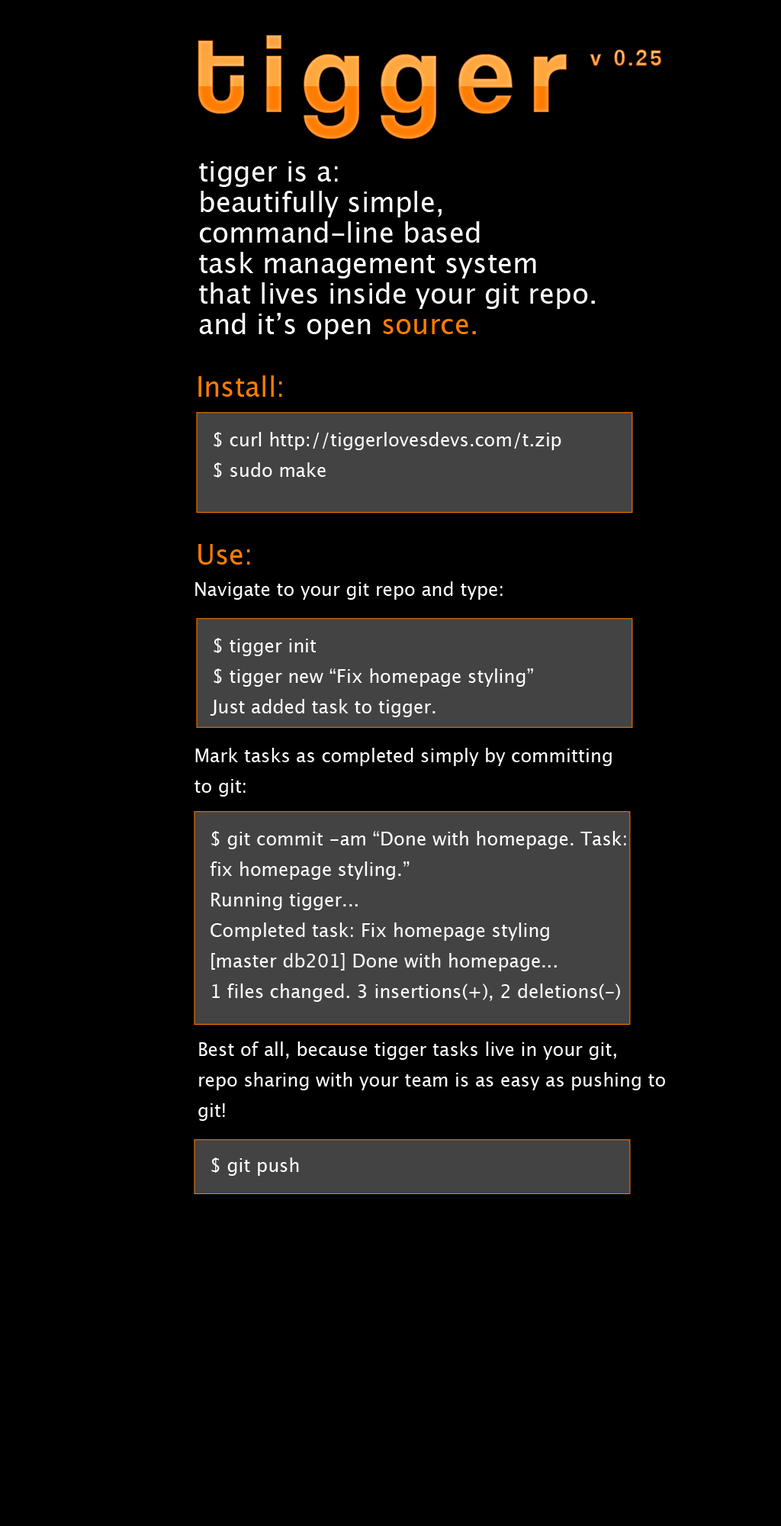
<style>
.page{position:relative;width:781px;height:1526px;background:#000000}
.page>*{position:absolute;margin:0}
.t1{font:114.5px "CoolveticaRg-Regular";letter-spacing:0.15em}
.t2{font:22.9px "CoolveticaRg-Regular";letter-spacing:0.15em}
.t3{font:27.5px/30.5px "LucidaGrande";color:#ffffff}
.t4{font:27.5px/30.5px "LucidaGrande";color:#ff7c00}
.t5{font:27.5px "LucidaGrande";color:#ff7c00}
.t6{font:18.3px/30.5px "LucidaGrande";color:#ffffff}
.t7{font:18.3px "LucidaGrande";color:#ffffff}
</style>
<div class="page">
<p class="t1" style="left:198px;top:35px;width:369px;height:104px">tigger</p>
<p class="t2" style="left:590px;top:50px;width:72px;height:16px">v 0.25</p>
<p class="t3" style="left:199px;top:161px;width:396px;height:179px">tigger is a: <br>beautifully simple, <br>command-line based<br>task management system <br>that lives inside your git repo.<br>and it’s open <span class="t4">source.</span></p>
<p class="t5" style="left:198px;top:375px;width:84px;height:22px">Install:</p>
<p class="t6" style="left:214px;top:432px;width:348px;height:46px">$ curl http://tiggerlovesdevs.com/t.zip<br>$ sudo make</p>
<p class="t5" style="left:198px;top:544px;width:52px;height:21px">Use:</p>
<p class="t7" style="left:195px;top:581px;width:308px;height:19px">Navigate to your git repo and type:</p>
<p class="t6" style="left:210px;top:638px;width:323px;height:79px">$ tigger init<br>$ tigger new “Fix homepage styling”<br>Just added task to tigger.</p>
<p class="t6" style="left:195px;top:748px;width:417px;height:49px">Mark tasks as completed simply by committing<br>to git:</p>
<p class="t6" style="left:210px;top:831px;width:416px;height:171px">$ git commit -am “Done with homepage. Task:<br>fix homepage styling.”<br>Running tigger...<br>Completed task: Fix homepage styling<br>[master db201] Done with homepage...<br>1 files changed. 3 insertions(+), 2 deletions(-)</p>
<p class="t6" style="left:198px;top:1042px;width:467px;height:79px">Best of all, because tigger tasks live in your git,<br>repo sharing with your team is as easy as pushing to<br>git!</p>
<p class="t7" style="left:211px;top:1158px;width:88px;height:18px">$ git push</p>
</div>
